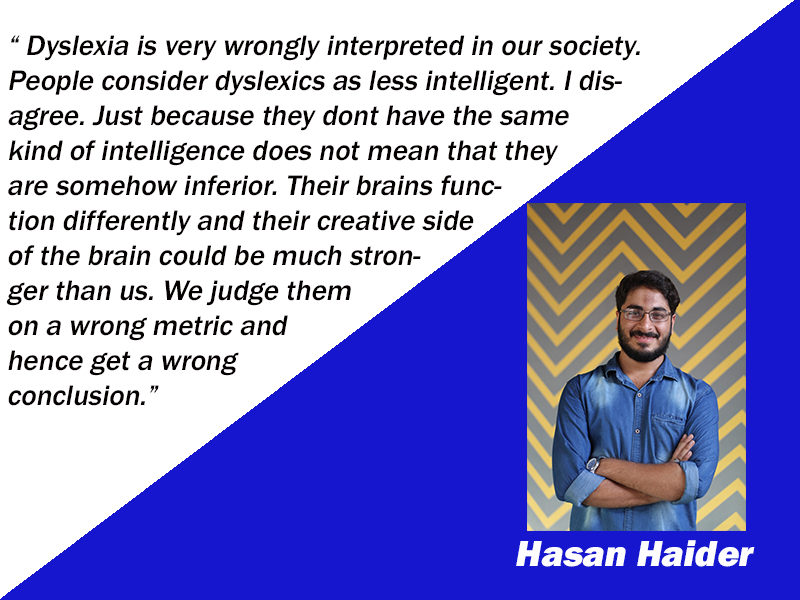
<style>
.page{position:relative;width:800px;height:600px;background:#ffffff}
.page>*{position:absolute;margin:0}
.t1{font:29.2px "FranklinGothic-Medium";color:#040000;font-style:italic}
.t2{font:37.5px "FranklinGothic-Heavy";color:#fdfdff;font-style:italic}
</style>
<div class="page">
<p class="t1" style="left:6px;top:35px;width:634px;height:371px">“ Dyslexia is very wrongly interpreted in our society. People consider dyslexics as less intelligent. I disagree. Just because they dont have the same kind of intelligence does not mean that they are somehow inferior. Their brains function differently and their creative side of the brain could be much stronger than us. We judge them on a wrong metric and hence get a wrong conclusion.”</p>
<p class="t2" style="left:516px;top:540px;width:239px;height:27px">Hasan Haider</p>
</div>
